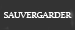
<style>
.page{position:relative;width:75px;height:30px;background:#333333}
.page>*{position:absolute;margin:0}
.t1{font:8.7px "Constantia";color:#ffffff}
</style>
<div class="page">
<p class="t1" style="left:4px;top:12px;width:68px;height:6px">SAUVERGARDER</p>
</div>
